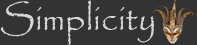
<style>
.page{position:relative;width:197px;height:45px;background:#333333}
.page>*{position:absolute;margin:0}
.t1{font:36px "Papyrus-Regular";color:#d8d8d8}
</style>
<div class="page">
<p class="t1" style="left:0px;top:0px;width:154px;height:45px">Simplicity</p>
</div>
